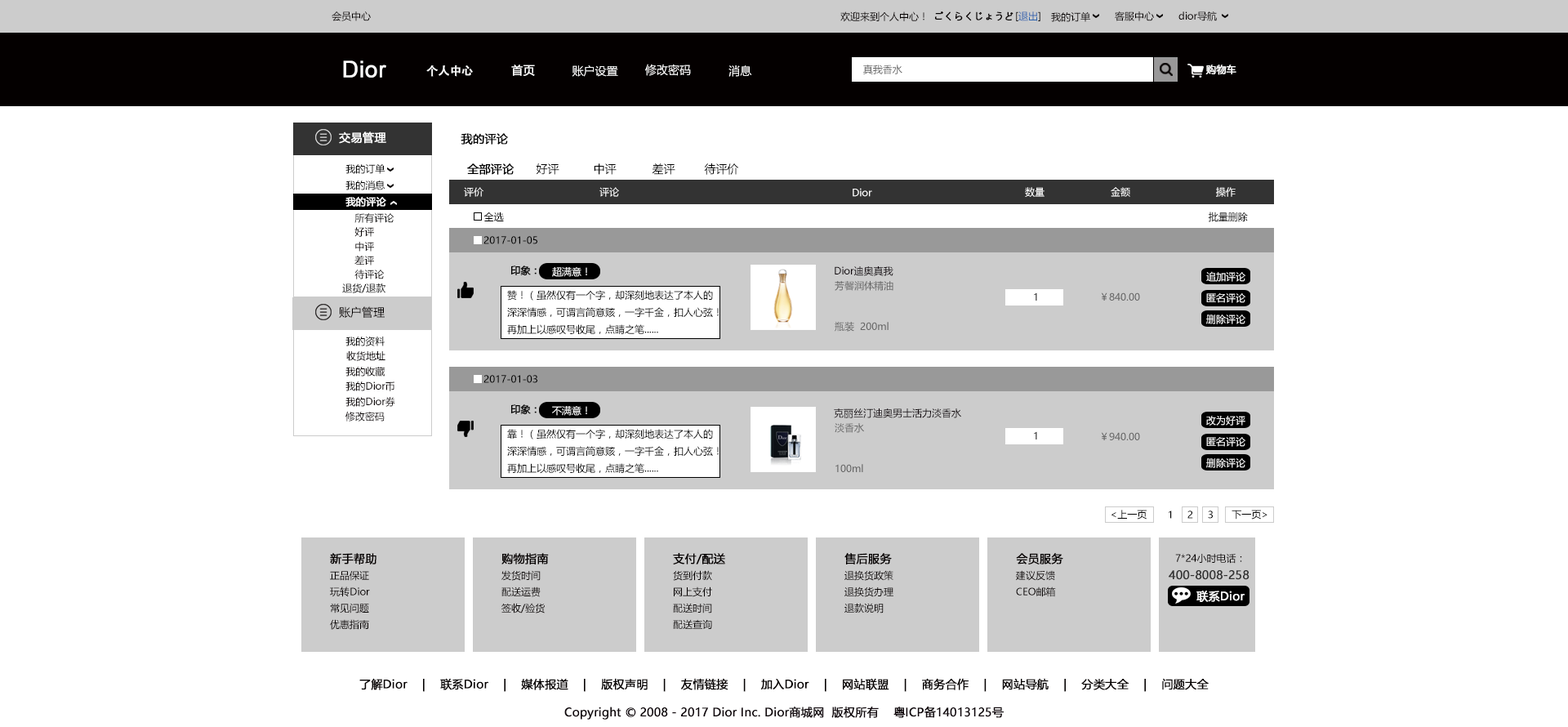
<style>
.page{position:relative;width:1568px;height:727px;background:#ffffff}
.page>*{position:absolute;margin:0}
.t1{font:9.8px "MicrosoftYaHei";color:#040000}
.t2{font:9.8px "MicrosoftYaHei";color:#040000;font-weight:bold}
.t3{font:9.8px "MicrosoftYaHei";color:#2a62ae}
.t4{font:22.9px "ArialMT";color:#ffffff;font-weight:bold}
.t5{font:11.4px "AdobeHeitiStd-Regular";color:#ffffff;font-weight:bold}
.t6{font:11.4px "MicrosoftYaHei";color:#ffffff;font-weight:bold}
.t7{font:11.4px "MicrosoftYaHei";color:#ffffff}
.t8{font:9.8px "MicrosoftYaHei";color:#666666}
.t9{font:9.8px "MicrosoftYaHei";color:#ffffff;font-weight:bold}
.t10{font:11.4px "MicrosoftYaHei";color:#000000;font-weight:bold}
.t11{font:9.8px "MicrosoftYaHei";color:#000000}
.t12{font:11.4px "MicrosoftYaHei";color:#000000}
.t13{font:9.8px "MicrosoftYaHei";color:#ffffff}
.t14{font:9.8px "MicrosoftYaHei";color:#000000;font-weight:bold}
.t15{font:9.8px "MicrosoftYaHei"}
.t16{font:11.4px "MicrosoftYaHei";color:#040000}
.t17{font:9.8px "MicrosoftYaHei";color:#060001}
.t18{font:11.4px "MicrosoftYaHei";color:#040000;font-weight:bold}
.t19{font:11.4px "MicrosoftYaHei";color:#333333;font-weight:bold}
</style>
<div class="page">
<p class="t1" style="left:332px;top:11px;width:39px;height:10px">会员中心</p>
<p class="t1" style="left:840px;top:11px;width:84px;height:11px">欢迎来到个人中心！</p>
<p class="t2" style="left:935px;top:11px;width:78px;height:10px">ごくらくじょうど</p>
<p class="t3" style="left:1016px;top:11px;width:24px;height:10px"><span class="t1">[</span>退出<span class="t1">]</span></p>
<p class="t1" style="left:1051px;top:11px;width:39px;height:11px">我的订单</p>
<p class="t1" style="left:1115px;top:11px;width:39px;height:10px">客服中心</p>
<p class="t1" style="left:1178px;top:11px;width:39px;height:10px">dior导航</p>
<p class="t4" style="left:343px;top:60px;width:43px;height:18px">Dior</p>
<p class="t5" style="left:426px;top:65px;width:47px;height:12px">个人中心</p>
<p class="t6" style="left:511px;top:65px;width:24px;height:11px">首页</p>
<p class="t7" style="left:572px;top:65px;width:46px;height:12px">账户设置</p>
<p class="t7" style="left:645px;top:64px;width:46px;height:12px">修改密码</p>
<p class="t7" style="left:728px;top:65px;width:24px;height:12px">消息</p>
<p class="t8" style="left:863px;top:65px;width:39px;height:9px">真我香水</p>
<p class="t9" style="left:1205px;top:65px;width:31px;height:10px">购物车</p>
<p class="t6" style="left:339px;top:131px;width:47px;height:13px">交易管理</p>
<p class="t10" style="left:461px;top:133px;width:47px;height:12px">我的评论</p>
<p class="t11" style="left:345px;top:163px;width:40px;height:11px">我的订单</p>
<p class="t10" style="left:467px;top:163px;width:47px;height:12px">全部评论</p>
<p class="t12" style="left:536px;top:163px;width:23px;height:12px">好评</p>
<p class="t12" style="left:594px;top:163px;width:23px;height:12px">中评</p>
<p class="t12" style="left:652px;top:163px;width:23px;height:12px">差评</p>
<p class="t12" style="left:704px;top:163px;width:35px;height:12px">待评价</p>
<p class="t11" style="left:345px;top:180px;width:40px;height:10px">我的消息</p>
<p class="t9" style="left:345px;top:197px;width:41px;height:10px">我的评论</p>
<p class="t13" style="left:464px;top:187px;width:19px;height:10px">评价</p>
<p class="t13" style="left:599px;top:187px;width:20px;height:10px">评论</p>
<p class="t13" style="left:853px;top:188px;width:19px;height:9px">Dior</p>
<p class="t13" style="left:1025px;top:187px;width:20px;height:10px">数量</p>
<p class="t13" style="left:1111px;top:187px;width:19px;height:10px">金额</p>
<p class="t13" style="left:1216px;top:187px;width:20px;height:10px">操作</p>
<p class="t11" style="left:354px;top:213px;width:40px;height:10px">所有评论</p>
<p class="t11" style="left:483px;top:212px;width:21px;height:9px">全选</p>
<p class="t11" style="left:1208px;top:212px;width:40px;height:10px">批量删除</p>
<p class="t1" style="left:354px;top:227px;width:20px;height:10px">好评</p>
<p class="t1" style="left:355px;top:242px;width:19px;height:10px">中评</p>
<p class="t11" style="left:483px;top:236px;width:54px;height:8px">2017-01-05</p>
<p class="t1" style="left:354px;top:255px;width:20px;height:10px">差评</p>
<p class="t1" style="left:354px;top:270px;width:31px;height:9px">待评论</p>
<p class="t14" style="left:510px;top:265px;width:27px;height:10px">印象：</p>
<p class="t13" style="left:552px;top:267px;width:35px;height:10px">超满意！</p>
<p class="t11" style="left:835px;top:266px;width:58px;height:10px">Dior迪奥真我</p>
<p class="t8" style="left:835px;top:281px;width:58px;height:10px">芳馨润体精油</p>
<p class="t13" style="left:1206px;top:271px;width:39px;height:11px">追加评论</p>
<p class="t11" style="left:342px;top:283px;width:43px;height:10px">退货/退款</p>
<p class="t11" style="left:507px;top:290px;width:212px;height:45px">赞！（虽然仅有一个字，却深刻地表达了本人的<br>深深情感，可谓言简意赅，一字千金，扣人心弦！再加上以感叹号收尾，点睛之笔......</p>
<p class="t15" style="left:1034px;top:292px;width:3px;height:9px">1</p>
<p class="t8" style="left:1101px;top:292px;width:39px;height:9px">￥840.00</p>
<p class="t13" style="left:1206px;top:293px;width:39px;height:10px">匿名评论</p>
<p class="t16" style="left:339px;top:306px;width:46px;height:12px">账户管理</p>
<p class="t13" style="left:1206px;top:314px;width:39px;height:10px">删除评论</p>
<p class="t8" style="left:835px;top:322px;width:54px;height:10px">瓶装  200ml</p>
<p class="t11" style="left:345px;top:336px;width:40px;height:10px">我的资料</p>
<p class="t17" style="left:346px;top:351px;width:39px;height:10px">收货地址</p>
<p class="t17" style="left:345px;top:367px;width:40px;height:9px">我的收藏</p>
<p class="t11" style="left:483px;top:375px;width:54px;height:8px">2017-01-03</p>
<p class="t17" style="left:345px;top:381px;width:49px;height:10px">我的Dior币</p>
<p class="t17" style="left:345px;top:397px;width:50px;height:10px">我的Dior券</p>
<p class="t17" style="left:345px;top:412px;width:40px;height:9px">修改密码</p>
<p class="t14" style="left:510px;top:404px;width:27px;height:10px">印象：</p>
<p class="t13" style="left:552px;top:406px;width:35px;height:10px">不满意！</p>
<p class="t11" style="left:834px;top:408px;width:127px;height:10px">克丽丝汀迪奥男士活力淡香水</p>
<p class="t8" style="left:835px;top:423px;width:29px;height:10px">淡香水</p>
<p class="t13" style="left:1206px;top:416px;width:39px;height:9px">改为好评</p>
<p class="t11" style="left:507px;top:429px;width:212px;height:45px">靠！（虽然仅有一个字，却深刻地表达了本人的<br>深深情感，可谓言简意赅，一字千金，扣人心弦！再加上以感叹号收尾，点睛之笔......</p>
<p class="t15" style="left:1034px;top:431px;width:3px;height:8px">1</p>
<p class="t8" style="left:1101px;top:432px;width:39px;height:8px">￥940.00</p>
<p class="t13" style="left:1206px;top:437px;width:39px;height:10px">匿名评论</p>
<p class="t13" style="left:1206px;top:458px;width:39px;height:10px">删除评论</p>
<p class="t8" style="left:835px;top:464px;width:28px;height:8px">100ml</p>
<p class="t11" style="left:1111px;top:510px;width:36px;height:9px">&lt;上一页</p>
<p class="t11" style="left:1232px;top:510px;width:35px;height:9px">下一页&gt;</p>
<p class="t11" style="left:1169px;top:510px;width:3px;height:9px">1</p>
<p class="t11" style="left:1187px;top:510px;width:6px;height:9px">2</p>
<p class="t11" style="left:1208px;top:510px;width:5px;height:9px">3</p>
<p class="t18" style="left:330px;top:553px;width:46px;height:11px">新手帮助</p>
<p class="t18" style="left:501px;top:553px;width:48px;height:11px">购物指南</p>
<p class="t18" style="left:673px;top:553px;width:52px;height:11px">支付/配送</p>
<p class="t18" style="left:844px;top:553px;width:48px;height:11px">售后服务</p>
<p class="t18" style="left:1016px;top:553px;width:47px;height:11px">会员服务</p>
<p class="t1" style="left:1175px;top:553px;width:67px;height:11px">7*24小时电话：</p>
<p class="t1" style="left:330px;top:571px;width:39px;height:10px">正品保证</p>
<p class="t1" style="left:501px;top:570px;width:40px;height:11px">发货时间</p>
<p class="t1" style="left:673px;top:570px;width:39px;height:11px">货到付款</p>
<p class="t1" style="left:844px;top:570px;width:49px;height:11px">退换货政策</p>
<p class="t1" style="left:1016px;top:570px;width:39px;height:11px">建议反馈</p>
<p class="t19" style="left:1169px;top:570px;width:81px;height:10px">400-8008-258</p>
<p class="t1" style="left:330px;top:586px;width:40px;height:11px">玩转Dior</p>
<p class="t1" style="left:501px;top:586px;width:40px;height:11px">配送运费</p>
<p class="t1" style="left:674px;top:586px;width:38px;height:11px">网上支付</p>
<p class="t1" style="left:844px;top:586px;width:49px;height:11px">退换货办理</p>
<p class="t1" style="left:1016px;top:586px;width:40px;height:11px">CEO邮箱</p>
<p class="t6" style="left:1196px;top:590px;width:49px;height:12px">联系Dior</p>
<p class="t1" style="left:330px;top:603px;width:39px;height:10px">常见问题</p>
<p class="t1" style="left:501px;top:603px;width:44px;height:10px">签收/验货</p>
<p class="t1" style="left:673px;top:603px;width:39px;height:10px">配送时间</p>
<p class="t1" style="left:844px;top:603px;width:40px;height:10px">退款说明</p>
<p class="t1" style="left:330px;top:619px;width:39px;height:11px">优惠指南</p>
<p class="t1" style="left:673px;top:619px;width:39px;height:10px">配送查询</p>
<p class="t18" style="left:359px;top:678px;width:850px;height:14px">了解Dior    |    联系Dior    |    媒体报道    |    版权声明    |    友情链接    |    加入Dior    |    网站联盟    |    商务合作    |    网站导航    |    分类大全    |    问题大全</p>
<p class="t10" style="left:564px;top:706px;width:440px;height:13px">Copyright © 2008 - 2017 Dior Inc. Dior商城网  版权所有    粤ICP备14013125号</p>
</div>
